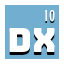
<style>
.page{position:relative;width:64px;height:64px;background:#ffffff}
.page>*{position:absolute;margin:0}
.t1{font:16.7px "GillSansMT-Condensed";letter-spacing:-0.01em}
.t2{font:16.7px "GillSansMT-Condensed";letter-spacing:-0.01em;color:#ffffff}
.t3{font:33.3px "Bungee-Regular";letter-spacing:-0.01em;color:#ffffff}
</style>
<div class="page">
<p class="t1" style="left:45px;top:12px;width:10px;height:11px">10</p>
<p class="t2" style="left:45px;top:10px;width:10px;height:11px">10</p>
<p class="t3" style="left:9px;top:28px;width:46px;height:24px">dx</p>
</div>
